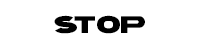
<style>
.page{position:relative;width:200px;height:50px;background:#ffffff}
.page>*{position:absolute;margin:0}
.t1{font:27px "RONORGERIONDEMO-Regular";color:#000000}
</style>
<div class="page">
<p class="t1" style="left:54px;top:15px;width:91px;height:19px">STOP</p>
</div>
